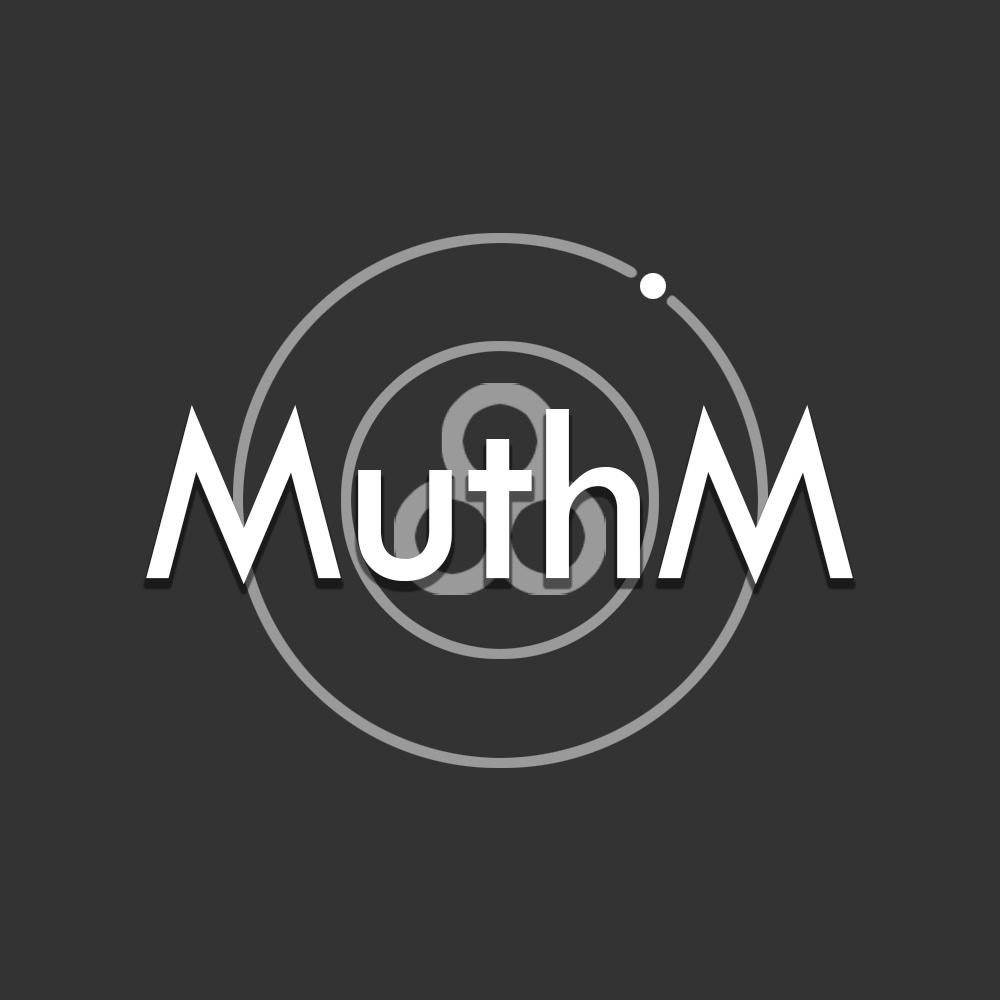
<style>
.page{position:relative;width:1000px;height:1000px;background:#333333}
.page>*{position:absolute;margin:0}
.t1{font:266.7px "TwCenMT-Regular";color:#ffffff}
</style>
<div class="page">
<p class="t1" style="left:146px;top:405px;width:707px;height:179px">MuthM</p>
</div>
